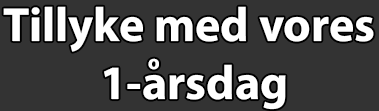
<style>
.page{position:relative;width:379px;height:111px;background:#333333}
.page>*{position:absolute;margin:0}
.t1{font:48px "MyriadConceptRoman-Bold";color:#ffffff}
.t2{font:20.1px "MyriadConceptRoman-Bold";color:#ffffff}
</style>
<div class="page">
<p class="t1" style="left:3px;top:6px;width:371px;height:104px;text-align:center">Tillyke med vores <br>1-arsdag</p>
<p class="t2" style="left:148px;top:58px;width:11px;height:12px">o</p>
</div>
